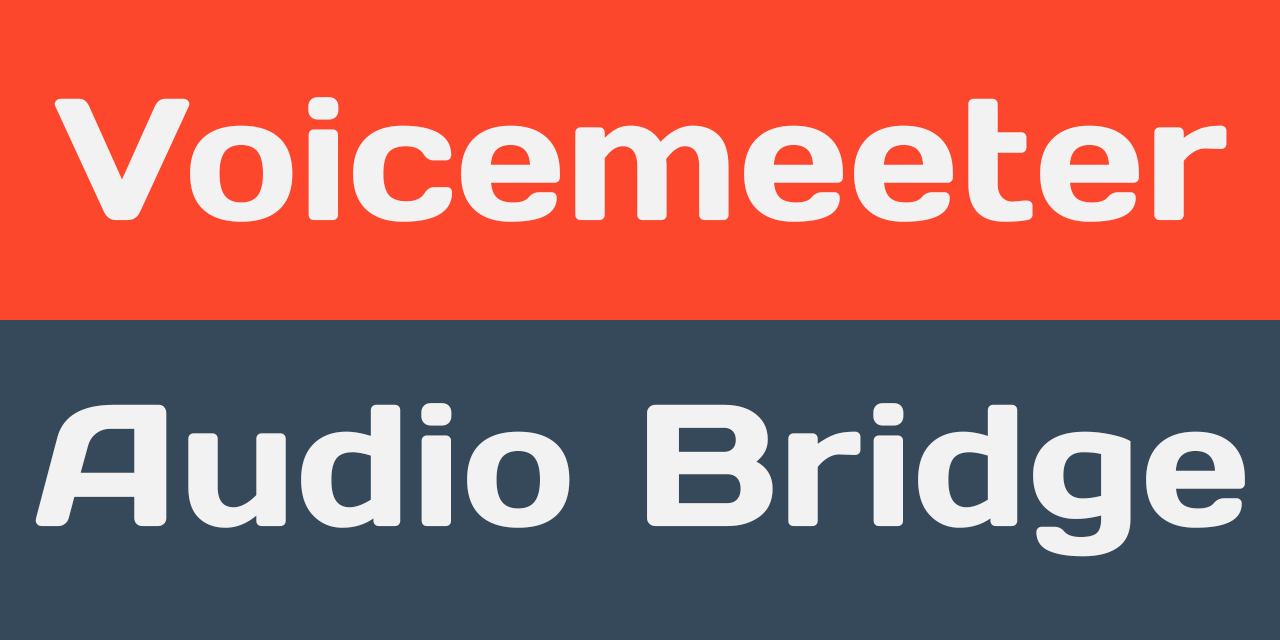
<style>
.page{position:relative;width:1280px;height:640px;background:#fc472c}
.page>*{position:absolute;margin:0}
.t1{font:173.3px "DaysOne-Regular";color:#f2f2f2}
</style>
<div class="page">
<p class="t1" style="left:54px;top:97px;width:1173px;height:125px">Voicemeeter</p>
<p class="t1" style="left:35px;top:403px;width:1210px;height:154px">Audio Bridge</p>
</div>
